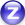
<style>
.page{position:relative;width:25px;height:25px}
.page>*{position:absolute;margin:0}
.t1{font:16px "Tahoma-Bold";letter-spacing:0.1em;color:#f8f6f6;scale:1.2 1}
</style>
<div class="page">
<p class="t1" style="left:7px;top:7px;width:12px;height:12px">Z</p>
</div>
